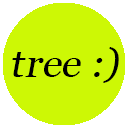
<style>
.page{position:relative;width:128px;height:128px;background:#cdf805}
.page>*{position:absolute;margin:0}
.t1{font:40px "Georgia";color:#000000;font-style:italic;scale:1.03 1}
</style>
<div class="page">
<p class="t1" style="left:12px;top:47px;width:107px;height:36px">tree :)</p>
</div>
